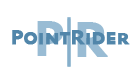
<style>
.page{position:relative;width:140px;height:83px;background:#ffffff}
.page>*{position:absolute;margin:0}
.t1{font:21.3px "Seravek-Medium";color:#5186aa;font-variant:small-caps;font-weight:bold}
.t2{font:21.3px "Seravek-Medium";color:#5186aa;font-weight:bold}
.t3{font:51.2px "Seravek-Medium";color:#99bcd4;font-variant:small-caps;font-weight:bold}
</style>
<div class="page">
<p class="t1" style="left:12px;top:30px;width:118px;height:15px"><span class="t2">P</span>oint<span class="t2">R</span>ider</p>
<p class="t3" style="left:37px;top:21px;width:27px;height:35px">P</p>
<p class="t3" style="left:77px;top:22px;width:31px;height:35px">R</p>
</div>
